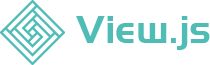
<style>
.page{position:relative;width:210px;height:65px;background:#ffffff}
.page>*{position:absolute;margin:0}
.t1{font:40px "HandelGothic";color:#50bcb6}
</style>
<div class="page">
<p class="t1" style="left:76px;top:16px;width:134px;height:34px">View.js</p>
</div>
